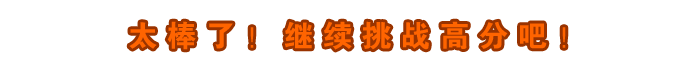
<style>
.page{position:relative;width:694px;height:69px;background:#ffffff}
.page>*{position:absolute;margin:0}
.t1{font:30px "Jdahei";letter-spacing:0.3em;color:#ff6400}
</style>
<div class="page">
<p class="t1" style="left:129px;top:21px;width:437px;height:29px">太棒了！继续挑战高分吧！</p>
</div>
